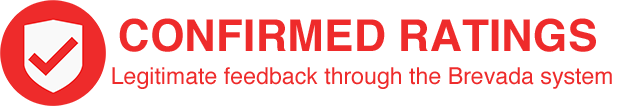
<style>
.page{position:relative;width:622px;height:106px;background:#ffffff}
.page>*{position:absolute;margin:0}
.t1{font:44px "Helvetica-Bold";color:#ee2b2b}
.t2{font:23.1px "Helvetica";color:#ee2b2b}
</style>
<div class="page">
<p class="t1" style="left:119px;top:18px;width:477px;height:34px">CONFIRMED RATINGS</p>
<p class="t2" style="left:112px;top:67px;width:500px;height:22px">Legitimate feedback through the Brevada system</p>
</div>
